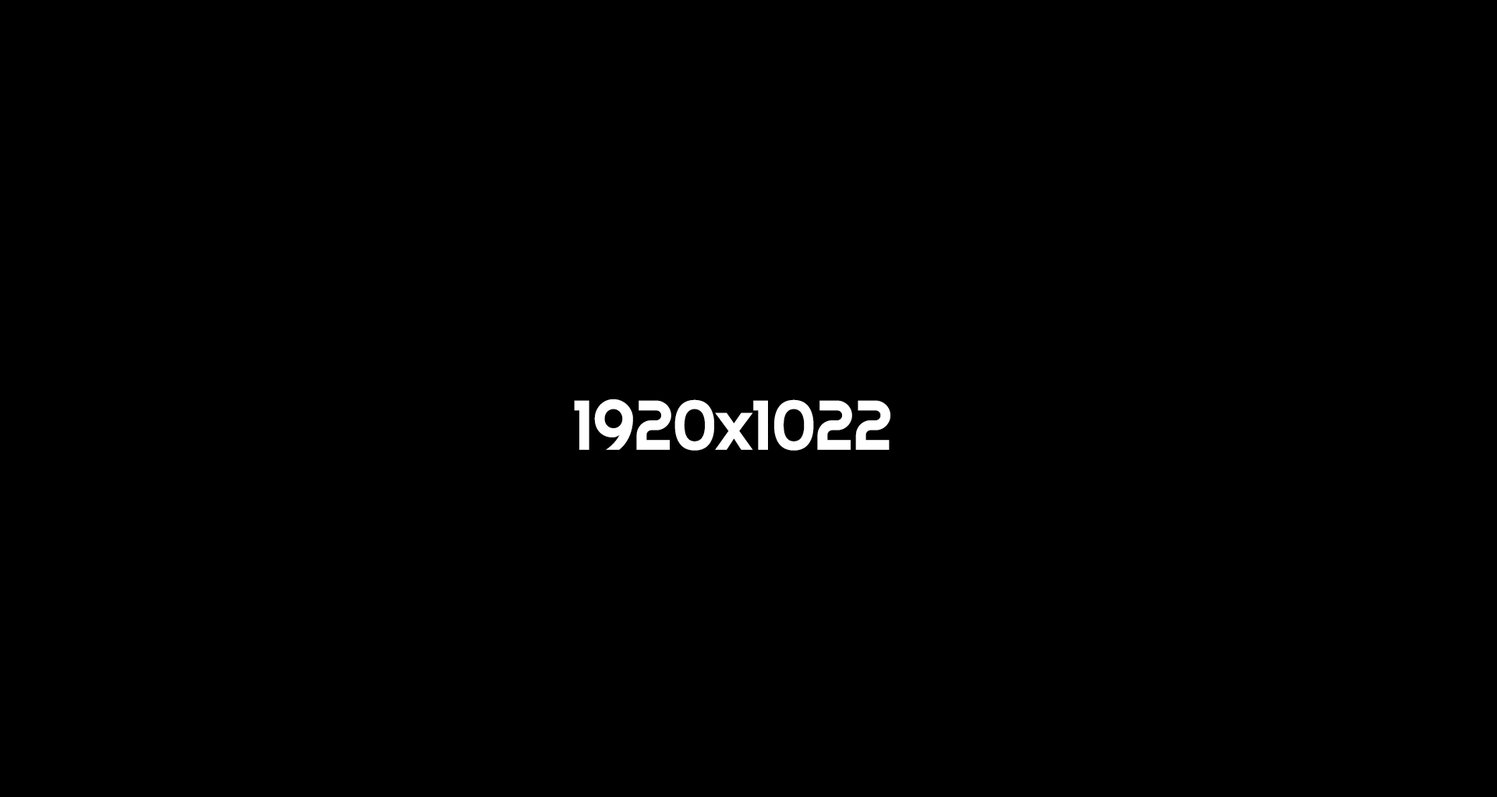
<style>
.page{position:relative;width:1497px;height:797px;background:#000000}
.page>*{position:absolute;margin:0}
.t1{font:70.2px "Righteous-Regular";letter-spacing:-0.025em;color:#ffffff}
</style>
<div class="page">
<p class="t1" style="left:574px;top:399px;width:316px;height:52px">1920x1022</p>
</div>
